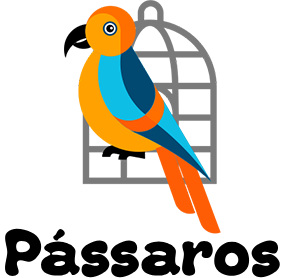
<style>
.page{position:relative;width:287px;height:278px;background:#ffffff}
.page>*{position:absolute;margin:0}
.t1{font:55.9px "Kush-Fat";color:#000000}
</style>
<div class="page">
<p class="t1" style="left:5px;top:228px;width:275px;height:50px">Pássaros</p>
</div>
